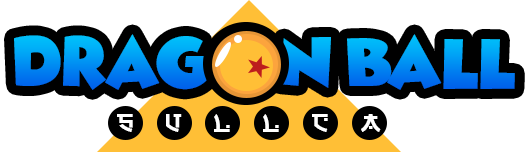
<style>
.page{position:relative;width:530px;height:152px;background:#ffffff}
.page>*{position:absolute;margin:0}
.t1{font:60px "WickedMouse"}
</style>
<div class="page">
<p class="t1" style="left:14px;top:34px;width:501px;height:56px">DRAG     N BALL</p>
</div>
